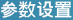
<style>
.page{position:relative;width:73px;height:20px}
.page>*{position:absolute;margin:0}
.t1{font:18px "LiHeiPro";color:#ffffff}
</style>
<div class="page">
<p class="t1" style="left:0px;top:1px;width:72px;height:17px">参数设置</p>
</div>
